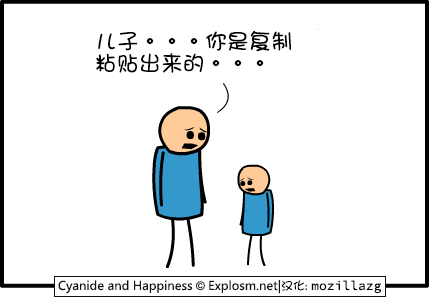
<style>
.page{position:relative;width:430px;height:298px;background:#ffffff}
.page>*{position:absolute;margin:0}
.t1{font:22px/22px "DFGirl";color:#000000}
</style>
<div class="page">
<p class="t1" style="left:96px;top:30px;width:195px;height:43px">儿子。。。你是复制<br>粘贴出来的。。。</p>
</div>
